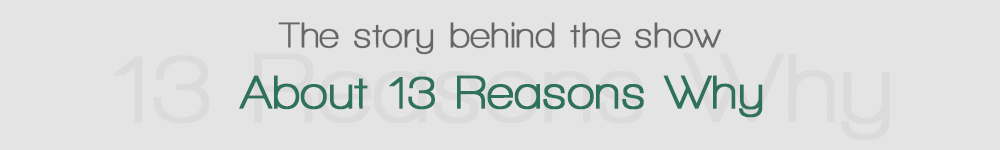
<style>
.page{position:relative;width:1000px;height:150px;background:#e4e4e4}
.page>*{position:absolute;margin:0}
.t1{font:36px "WalkwaySemiBold";color:#666666;font-weight:bold}
.t2{font:48px "WalkwayBold";color:#2e7259;font-weight:bold}
</style>
<div class="page">
<p class="t1" style="left:278px;top:22px;width:444px;height:33px">The story behind the show</p>
<p class="t2" style="left:239px;top:75px;width:524px;height:43px">About 13 Reasons Why</p>
</div>
